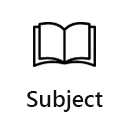
<style>
.page{position:relative;width:129px;height:124px;background:#ffffff}
.page>*{position:absolute;margin:0}
.t1{font:22.9px "YuGothicUI-Semibold";color:#111111}
</style>
<div class="page">
<p class="t1" style="left:27px;top:90px;width:76px;height:22px">Subject</p>
</div>
